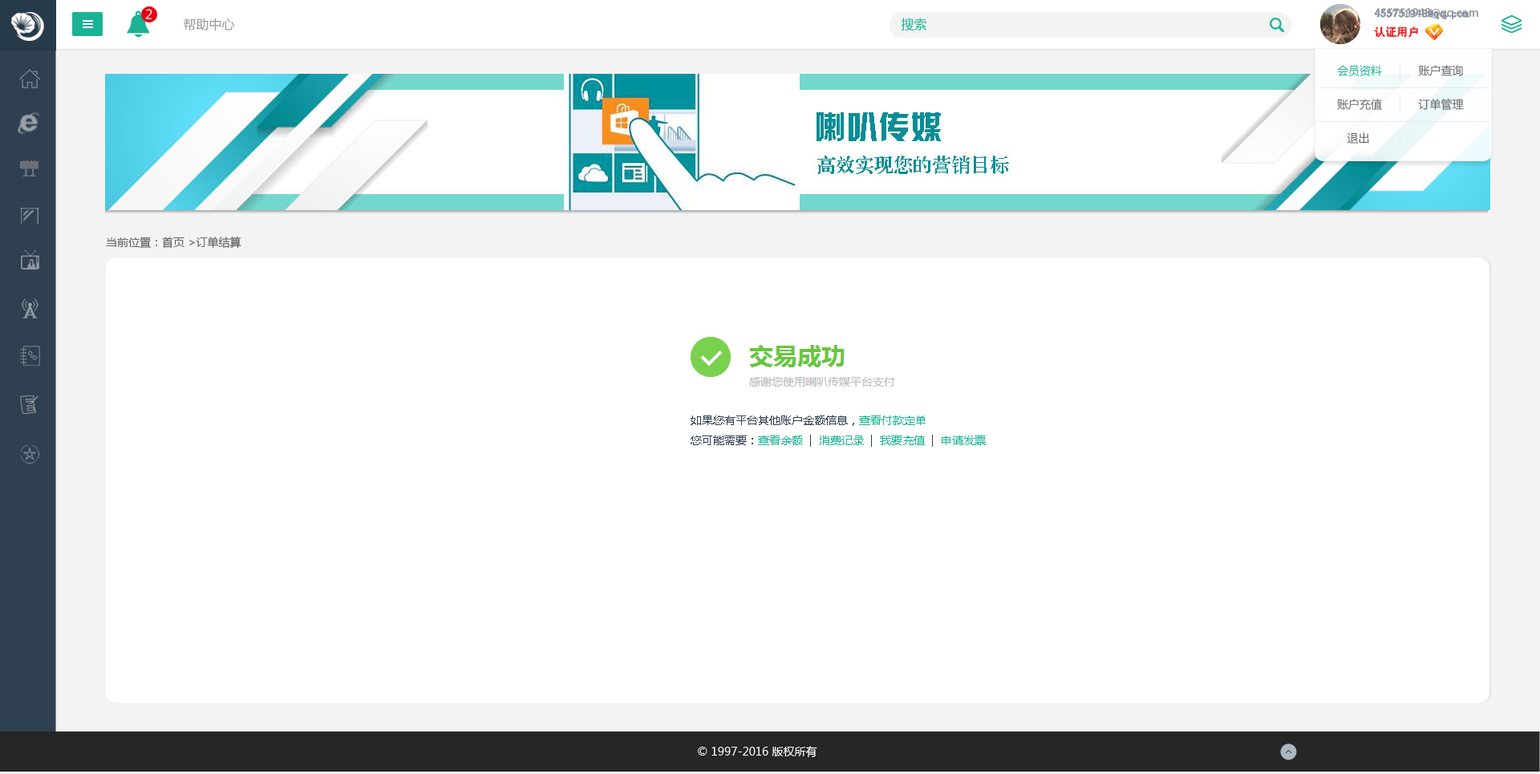
<style>
.page{position:relative;width:1540px;height:774px;background:#ffffff}
.page>*{position:absolute;margin:0}
.t1{font:12.8px "MicrosoftYaHei";color:#ffffff}
.t2{font:12.8px "MicrosoftYaHei";color:#999999}
.t3{font:12.8px "MicrosoftYaHei";color:#1ab394}
.t4{font:11.2px/19.3px "AdobeHeitiStd-Regular";color:#999999}
.t5{font:11.2px/19.3px "AdobeHeitiStd-Regular";color:#f61e1e}
.t6{font:11.2px/19.3px "AdobeHeitiStd-Regular";color:#ffffff}
.t7{font:11.2px/19.3px "SimSun";color:#8894a4;font-weight:bold}
.t8{font:11.2px/19.3px "SimSun";color:#f61e1e}
.t9{font:11.2px/33.7px "MicrosoftYaHei";color:#666666}
.t10{font:11.2px/33.7px "MicrosoftYaHei";color:#1ab394}
.t11{font:11.2px "MicrosoftYaHei";color:#666666}
.t12{font:11.2px "MicrosoftYaHei";color:#2f4050}
.t13{font:11.2px "MicrosoftYaHei";color:#1ab394}
.t14{font:11.2px "MicrosoftYaHei";color:#ffffff}
</style>
<div class="page">
<p class="t1" style="left:145px;top:9px;width:7px;height:10px">2</p>
<p class="t2" style="left:184px;top:18px;width:51px;height:13px">帮助中心</p>
<p class="t3" style="left:901px;top:18px;width:26px;height:13px">搜索</p>
<p class="t4" style="left:1374px;top:8px;width:105px;height:30px">455751948@qq.com<br><span class="t5">认证用户               </span><span class="t6">退出</span></p>
<p class="t7" style="left:1374px;top:9px;width:96px;height:29px">455751948@qq.com<br><span class="t8">认证用户</span></p>
<p class="t9" style="left:1337px;top:65px;width:127px;height:79px"><span class="t10">会员资料</span>           账户查询<br>账户充值           订单管理           <br>   退出</p>
<p class="t11" style="left:106px;top:237px;width:135px;height:12px">当前位置：首页 &gt;订单结算</p>
<p class="t12" style="left:691px;top:416px;width:295px;height:31px">如果您有平台其他账户金额信息，<span class="t13">查看付款定单<br></span>您可能需要：<span class="t13">查看余额</span>  |  <span class="t13">消费记录</span>  |  <span class="t13">我要充值</span>  |  <span class="t13">申请发票</span></p>
<p class="t14" style="left:698px;top:746px;width:119px;height:12px">© 1997-2016 版权所有</p>
</div>
